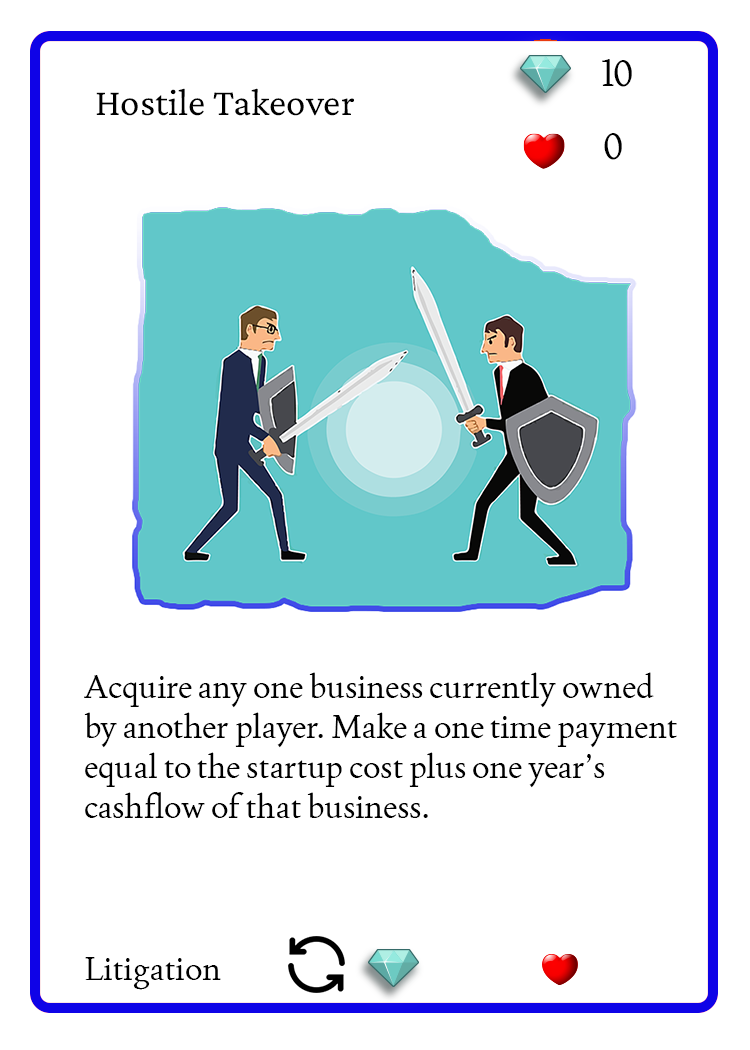
<style>
.page{position:relative;width:750px;height:1050px;background:#ffffff}
.page>*{position:absolute;margin:0}
.t1{font:37.5px "Joan-Regular";color:#000000;text-transform:uppercase}
.t2{font:38.9px "CrimsonPro-Regular";color:#000000}
.t3{font:33.3px "Joan-Regular";color:#000000}
</style>
<div class="page">
<p class="t1" style="left:602px;top:59px;width:30px;height:28px">10</p>
<p class="t2" style="left:96px;top:88px;width:258px;height:28px">Hostile Takeover</p>
<p class="t1" style="left:604px;top:133px;width:18px;height:27px">0</p>
<p class="t3" style="left:84px;top:672px;width:593px;height:146px">Acquire any one business currently owned by another player. Make a one time payment equal to the startup cost plus one year’s cashflow of that business.</p>
<p class="t3" style="left:85px;top:957px;width:136px;height:33px">Litigation</p>
</div>
